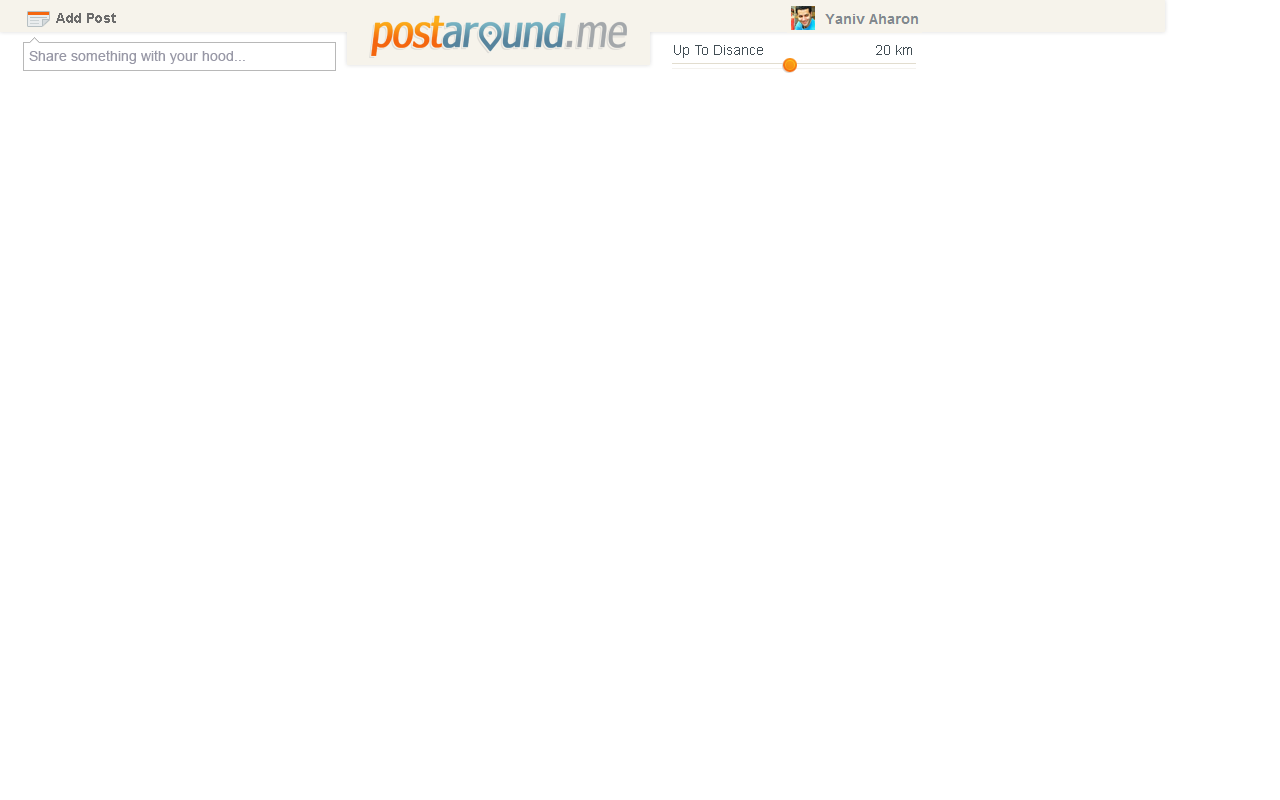
<style>
.page{position:relative;width:1280px;height:800px;background:#ffffff}
.page>*{position:absolute;margin:0}
.t1{font:14px "Arial-BoldMT";letter-spacing:-0.025em;color:#6c6c6c}
.t2{font:14px "ArialMT";color:#9898a6}
.t3{font:14px "ArialMT";color:#424e55}
</style>
<div class="page">
<p class="t1" style="left:56px;top:13px;width:60px;height:10px">Add Post</p>
<p class="t2" style="left:29px;top:50px;width:216px;height:14px">Share something with your hood...</p>
<p class="t3" style="left:674px;top:45px;width:89px;height:13px">Up To Disance</p>
<p class="t3" style="left:876px;top:45px;width:36px;height:10px">20 km</p>
</div>
